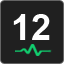
<style>
.page{position:relative;width:64px;height:64px;background:#202020}
.page>*{position:absolute;margin:0}
.t1{font:36px "Arial-BoldMT";color:#ffffff}
</style>
<div class="page">
<p class="t1" style="left:13px;top:14px;width:37px;height:26px">12</p>
</div>
